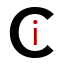
<style>
.page{position:relative;width:64px;height:64px;background:#ffffff}
.page>*{position:absolute;margin:0}
.t1{font:104px "Avenir-Roman";color:#000000}
.t2{font:36px "Avenir-Roman";color:#b10000}
</style>
<div class="page">
<p class="t1" style="left:9px;top:7px;width:45px;height:51px">c</p>
<p class="t2" style="left:33px;top:20px;width:5px;height:25px">i</p>
</div>
